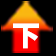
<style>
.page{position:relative;width:56px;height:56px;background:#000000}
.page>*{position:absolute;margin:0}
.t1{font:28px "KozGoPr6N-Heavy";color:#ffffff}
</style>
<div class="page">
<p class="t1" style="left:13px;top:23px;width:26px;height:26px">下</p>
</div>
